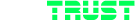
<style>
.page{position:relative;width:138px;height:20px;background:#ffffff}
.page>*{position:absolute;margin:0}
.t1{font:18px "Construction-Lines";color:#00ff57}
</style>
<div class="page">
<p class="t1" style="left:47px;top:0px;width:88px;height:20px">TRUST</p>
</div>
